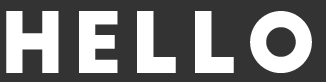
<style>
.page{position:relative;width:326px;height:82px;background:#333333}
.page>*{position:absolute;margin:0}
.t1{font:82.3px "BigJohn";letter-spacing:0.1em;color:#ffffff;text-transform:uppercase}
</style>
<div class="page">
<p class="t1" style="left:6px;top:11px;width:306px;height:62px">hello</p>
</div>
